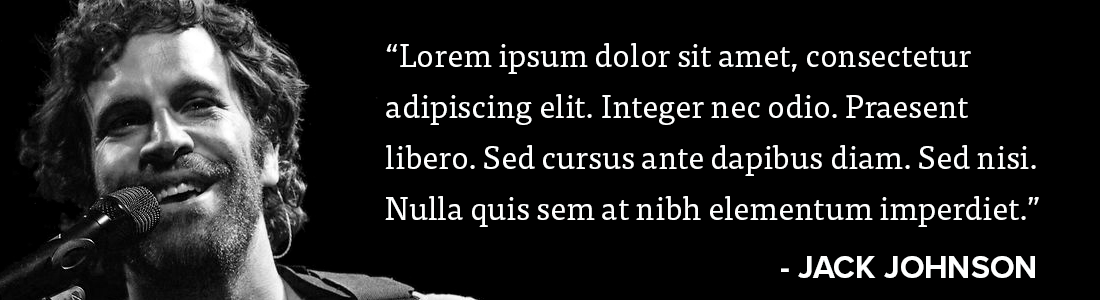
<style>
.page{position:relative;width:1100px;height:300px;background:#000000}
.page>*{position:absolute;margin:0}
.t1{font:32px/51px "TisaPro";color:#feffff}
.t2{font:32px "ProximaNova-Bold";color:#feffff}
</style>
<div class="page">
<p class="t1" style="left:385px;top:43px;width:654px;height:184px">“Lorem ipsum dolor sit amet, consectetur adipiscing elit. Integer nec odio. Praesent libero. Sed cursus ante dapibus diam. Sed nisi. Nulla quis sem at nibh elementum imperdiet.”</p>
<p class="t2" style="left:781px;top:256px;width:254px;height:22px">- JACK JOHNSON</p>
</div>
